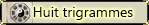
<style>
.page{position:relative;width:149px;height:25px;background:#d9d5bd}
.page>*{position:absolute;margin:0}
.t1{font:14px "LaoUI";color:#000000}
</style>
<div class="page">
<p class="t1" style="left:33px;top:7px;width:100px;height:13px">Huit trigrammes</p>
</div>
